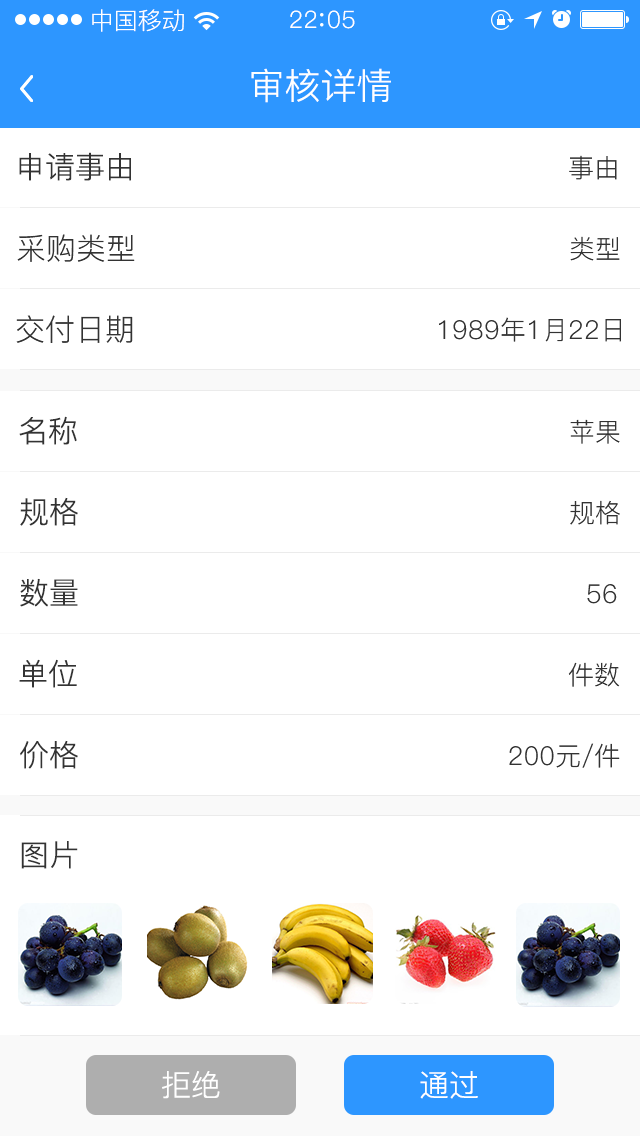
<style>
.page{position:relative;width:640px;height:1136px;background:#ffffff}
.page>*{position:absolute;margin:0}
.t1{font:24px "PingFang-SC-Regular";color:#ffffff}
.t2{font:24px "PingFang-SC-Regular";letter-spacing:0.03em;color:#ffffff}
.t3{font:36px "PingFang-SC-Regular";color:#ffffff}
.t4{font:30px "PingFang-SC-Regular";color:#333333}
.t5{font:26px "PingFang-SC-Regular";color:#333333}
.t6{font:30px "PingFang-SC-Regular";color:#ffffff}
</style>
<div class="page">
<p class="t1" style="left:92px;top:9px;width:92px;height:23px">中国移动</p>
<p class="t2" style="left:290px;top:10px;width:65px;height:19px">22 05</p>
<p class="t3" style="left:251px;top:68px;width:140px;height:35px">审核详情</p>
<p class="t4" style="left:19px;top:152px;width:112px;height:29px">申请事由</p>
<p class="t5" style="left:569px;top:155px;width:48px;height:25px">事由</p>
<p class="t4" style="left:17px;top:234px;width:118px;height:28px">采购类型</p>
<p class="t5" style="left:570px;top:236px;width:50px;height:25px">类型</p>
<p class="t4" style="left:16px;top:315px;width:117px;height:28px">交付日期</p>
<p class="t5" style="left:439px;top:317px;width:182px;height:25px">1989年1月22日</p>
<p class="t4" style="left:19px;top:416px;width:58px;height:29px">名称</p>
<p class="t5" style="left:570px;top:419px;width:50px;height:25px">苹果</p>
<p class="t4" style="left:20px;top:497px;width:58px;height:29px">规格</p>
<p class="t5" style="left:570px;top:500px;width:50px;height:25px">规格</p>
<p class="t4" style="left:20px;top:578px;width:58px;height:29px">数量</p>
<p class="t5" style="left:587px;top:584px;width:30px;height:20px">56</p>
<p class="t4" style="left:19px;top:659px;width:58px;height:29px">单位</p>
<p class="t5" style="left:568px;top:662px;width:52px;height:25px">件数</p>
<p class="t4" style="left:20px;top:740px;width:58px;height:29px">价格</p>
<p class="t5" style="left:509px;top:743px;width:111px;height:25px">200元/件</p>
<p class="t4" style="left:21px;top:841px;width:57px;height:28px">图片</p>
<p class="t6" style="left:162px;top:1071px;width:58px;height:28px">拒绝</p>
<p class="t6" style="left:420px;top:1071px;width:58px;height:28px">通过</p>
</div>
